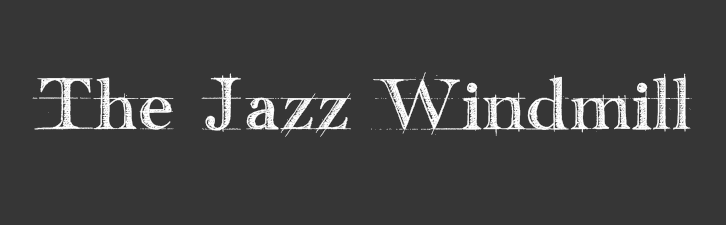
<style>
.page{position:relative;width:726px;height:225px;background:#363636}
.page>*{position:absolute;margin:0}
.t1{font:61.2px "handwriting-draft_free-version";color:#ffffff}
</style>
<div class="page">
<p class="t1" style="left:32px;top:72px;width:660px;height:65px">The Jazz Windmill</p>
</div>
